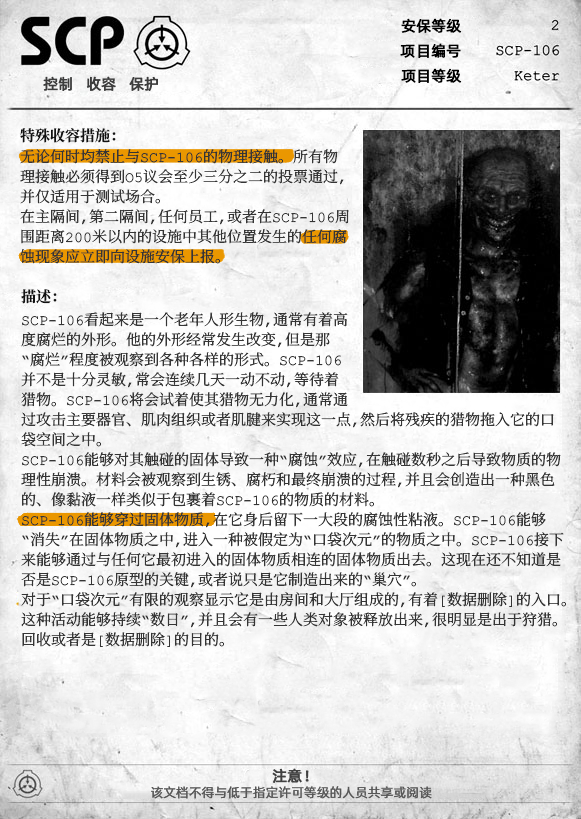
<style>
.page{position:relative;width:581px;height:819px}
.page>*{position:absolute;margin:0}
.t1{font:15px "AlibabaPuHuiTiR";color:#000000;font-weight:bold}
.t2{font:15px "AlibabaPuHuiTiR";color:#3d3d3d;font-weight:bold}
.t3{font:15px "ContainmentBreach-Bold";color:#121212}
.t4{font:15px/20px "ContainmentBreach-Regular";color:#353535}
.t5{font:15px "AlibabaPuHuiTiR";color:#414141;font-weight:bold}
.t6{font:13px "AlibabaPuHuiTiR";color:#575757}
</style>
<div class="page">
<p class="t1" style="left:401px;top:18px;width:61px;height:15px">安保等级</p>
<p class="t1" style="left:400px;top:43px;width:61px;height:15px">项目编号</p>
<p class="t2" style="left:43px;top:76px;width:115px;height:15px">控制   收容   保护</p>
<p class="t1" style="left:401px;top:68px;width:61px;height:15px">项目等级</p>
<p class="t3" style="left:20px;top:128px;width:96px;height:15px">特殊收容措施：</p>
<p class="t4" style="left:20px;top:149px;width:329px;height:115px">无论何时均禁止与SCP-106的物理接触。所有物<br>理接触必须得到O5议会至少三分之二的投票通过，<br>并仅适用于测试场合。<br>在主隔间，第二隔间，任何员工，或者在SCP-106周<br>围距离200米以内的设施中其他位置发生的任何腐<br>蚀现象应立即向设施安保上报。</p>
<p class="t3" style="left:21px;top:289px;width:36px;height:15px">描述：</p>
<p class="t4" style="left:21px;top:312px;width:545px;height:335px">SCP-106看起来是一个老年人形生物，通常有着高<br>度腐烂的外形。他的外形经常发生改变，但是那<br>“腐烂”程度被观察到各种各样的形式。SCP-106<br>并不是十分灵敏，常会连续几天一动不动，等待着<br>猎物。SCP-106将会试着使其猎物无力化，通常通<br>过攻击主要器官、肌肉组织或者肌腱来实现这一点，然后将残疾的猎物拖入它的口<br>袋空间之中。<br>SCP-106能够对其触碰的固体导致一种“腐蚀”效应，在触碰数秒之后导致物质的物<br>理性崩溃。材料会被观察到生锈、腐朽和最终崩溃的过程，并且会创造出一种黑色<br>的、像黏液一样类似于包裹着SCP-106的物质的材料。<br>SCP-106能够穿过固体物质，在它身后留下一大段的腐蚀性粘液。SCP-106能够<br>“消失”在固体物质之中，进入一种被假定为“口袋次元”的物质之中。SCP-106接下<br>来能够通过与任何它最初进入的固体物质相连的固体物质出去。这现在还不知道是<br>否是SCP-106原型的关键，或者说只是它制造出来的“巢穴”。<br>对于“口袋次元”有限的观察显示它是由房间和大厅组成的，有着[数据删除]的入口。<br>这种活动能够持续“数日”，并且会有一些人类对象被释放出来，很明显是出于狩猎。<br>回收或者是[数据删除]的目的。</p>
<p class="t5" style="left:272px;top:768px;width:37px;height:15px">注意！</p>
<p class="t6" style="left:151px;top:786px;width:281px;height:13px">该文档不得与低于指定许可等级的人员共享或阅读</p>
</div>
